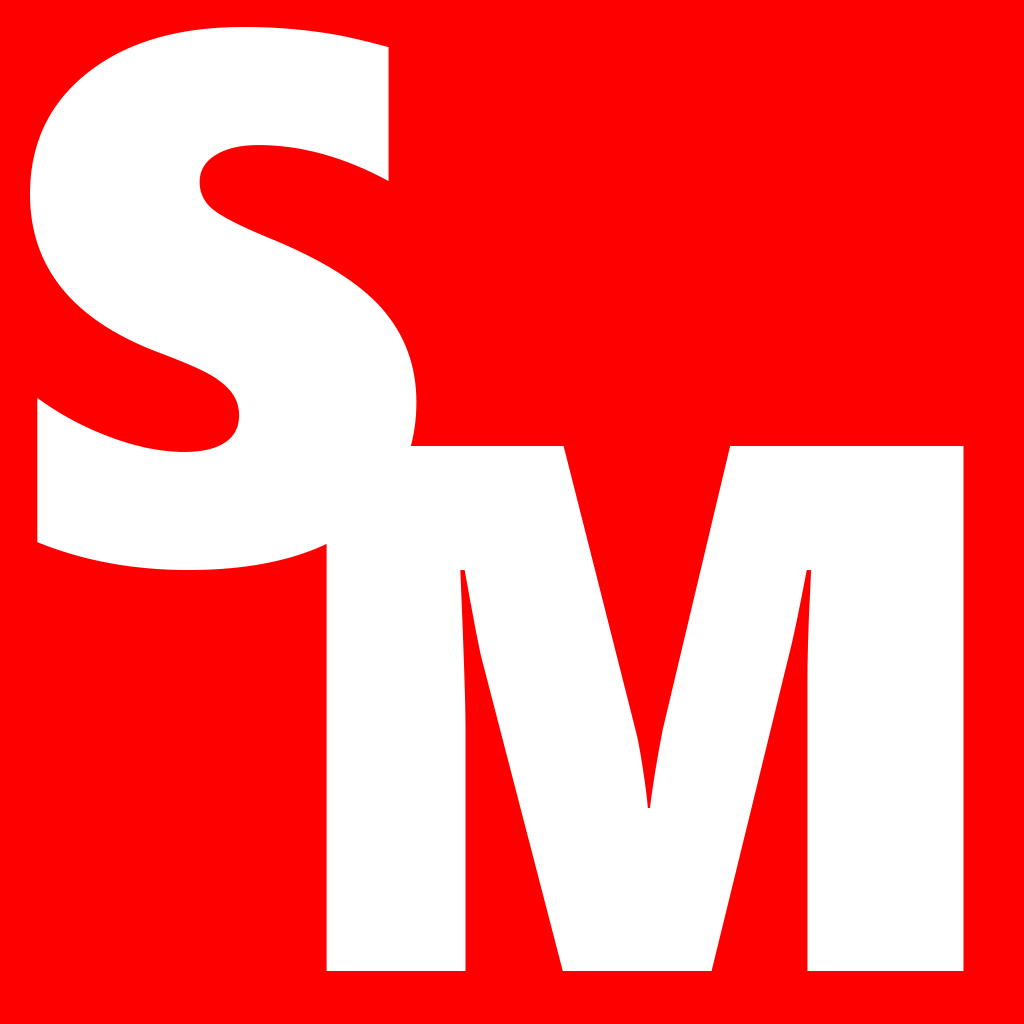
<style>
.page{position:relative;width:1024px;height:1024px;background:#ff0000}
.page>*{position:absolute;margin:0}
.t1{font:750px "SegoeUIBlack";letter-spacing:0.05em;color:#ffffff}
</style>
<div class="page">
<p class="t1" style="left:30px;top:27px;width:387px;height:543px">S</p>
<p class="t1" style="left:326px;top:446px;width:638px;height:525px">M</p>
</div>
